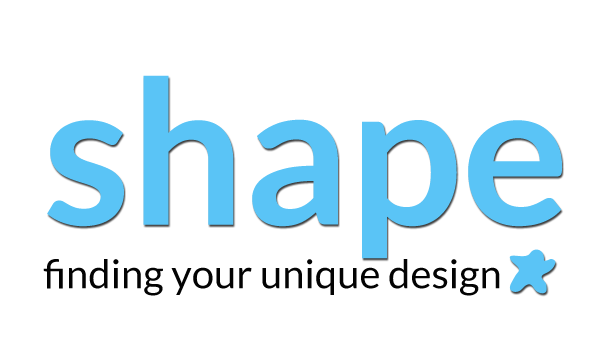
<style>
.page{position:relative;width:600px;height:360px;background:#ffffff}
.page>*{position:absolute;margin:0}
.t1{font:200px "Lato-Bold";color:#5ac4f6}
.t2{font:40px "Lato-Regular";color:#030303}
</style>
<div class="page">
<p class="t1" style="left:47px;top:75px;width:516px;height:184px">shape</p>
<p class="t2" style="left:43px;top:259px;width:457px;height:37px">finding your unique design</p>
</div>
